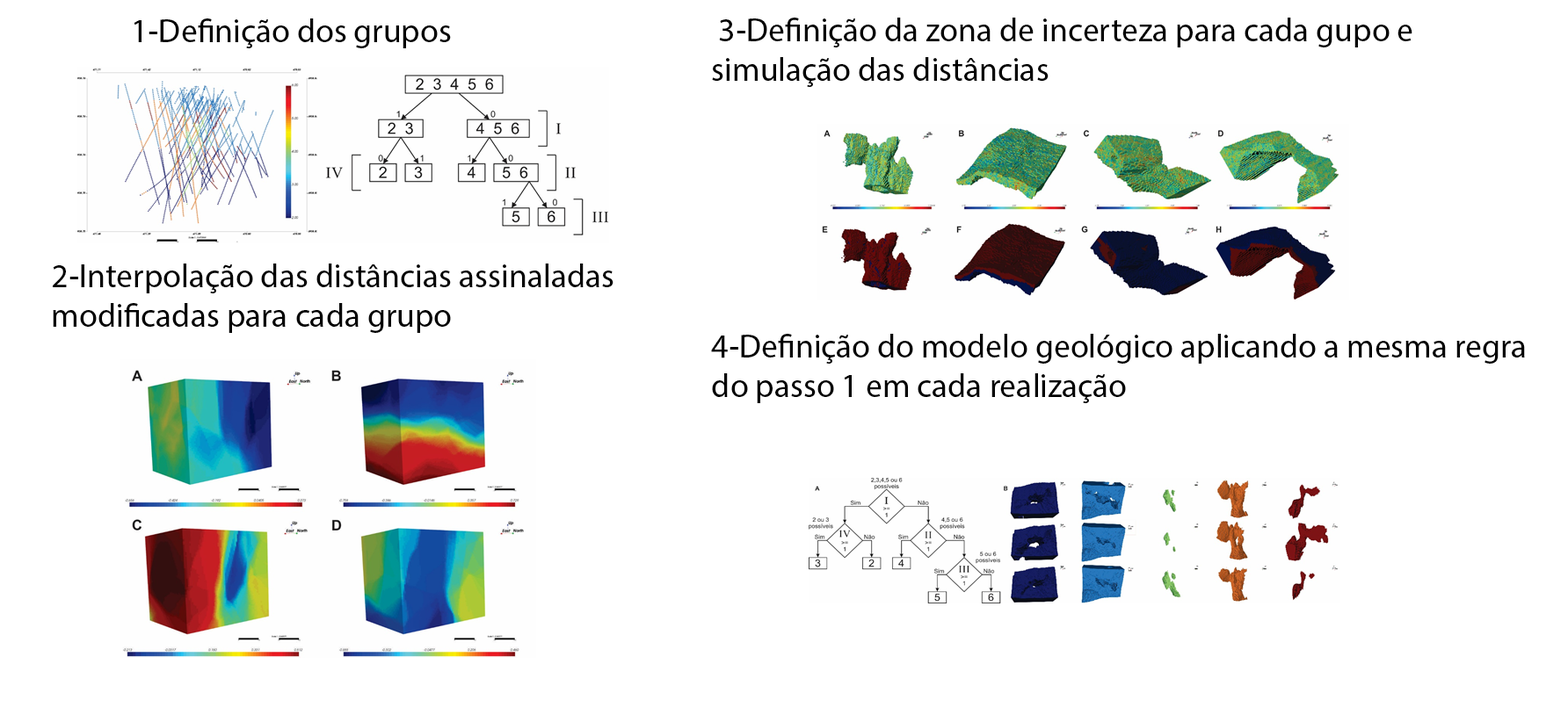
<style>
.page{position:relative;width:1568px;height:722px;background:#ffffff}
.page>*{position:absolute;margin:0}
.t1{font:33.1px "MyriadHebrew-Regular";color:#000000}
</style>
<div class="page">
<p class="t1" style="left:712px;top:18px;width:700px;height:69px;text-align:right">3-Definição da zona de incerteza para cada gupo e <br>simulação das distâncias</p>
<p class="t1" style="left:134px;top:18px;width:317px;height:30px">1-Definição dos grupos</p>
<p class="t1" style="left:53px;top:264px;width:560px;height:69px;text-align:right">2-Interpolação das distâncias assinaladas<br> modificadas para cada grupo</p>
<p class="t1" style="left:711px;top:334px;width:814px;height:69px;text-align:right">4-Definição do modelo geológico aplicando a mesma regra<br>do passo 1 em cada realização</p>
</div>
